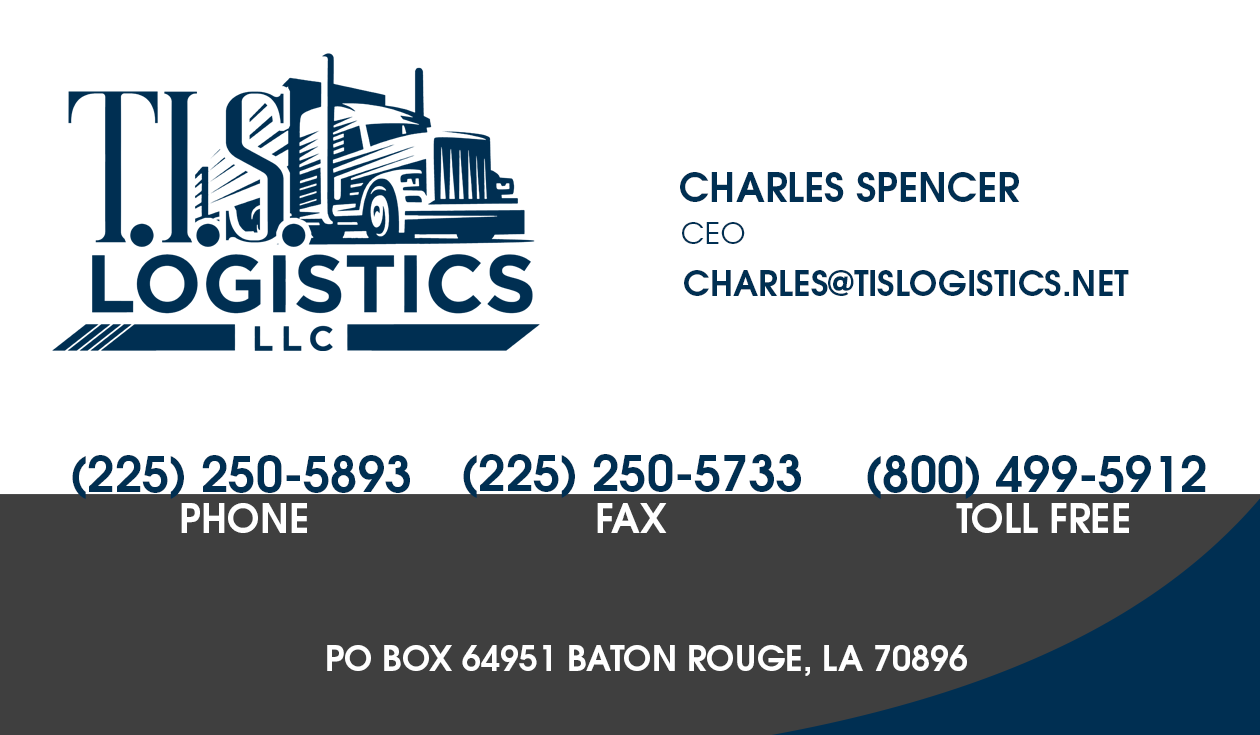
<style>
.page{position:relative;width:1260px;height:735px;background:#ffffff}
.page>*{position:absolute;margin:0}
.t1{font:38.9px "TeXGyreAdventor-Bold";color:#002f52;text-transform:uppercase}
.t2{font:29.2px "TeXGyreAdventor-Regular";color:#002f52;text-transform:uppercase}
.t3{font:34px "TeXGyreAdventor-Bold";color:#002f52;font-variant:small-caps}
.t4{font:48.6px "TeXGyreAdventor-Bold";color:#002f52;text-transform:uppercase}
.t5{font:38.9px "TeXGyreAdventor-Bold";color:#ffffff;text-transform:uppercase}
.t6{font:34px "TeXGyreAdventor-Bold";color:#ffffff;text-transform:uppercase}
</style>
<div class="page">
<p class="t1" style="left:680px;top:172px;width:340px;height:30px">Charles Spencer</p>
<p class="t2" style="left:682px;top:222px;width:63px;height:22px">CEO</p>
<p class="t3" style="left:684px;top:270px;width:445px;height:26px">CHARLES@TISLOGISTICS.NET</p>
<p class="t4" style="left:72px;top:455px;width:338px;height:44px">(225) 250-5893</p>
<p class="t4" style="left:463px;top:454px;width:338px;height:44px">(225) 250-5733</p>
<p class="t4" style="left:867px;top:455px;width:339px;height:44px">(800) 499-5912</p>
<p class="t5" style="left:181px;top:503px;width:126px;height:30px">PHONE</p>
<p class="t5" style="left:597px;top:503px;width:70px;height:30px">FAX</p>
<p class="t5" style="left:956px;top:503px;width:173px;height:30px">TOLL FREE</p>
<p class="t6" style="left:327px;top:645px;width:640px;height:31px">PO BOX 64951 baton Rouge, La 70896</p>
</div>
